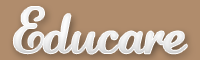
<style>
.page{position:relative;width:200px;height:60px;background:#b08c6c}
.page>*{position:absolute;margin:0}
.t1{font:46px "LaurenScript";color:#f8f8f8}
</style>
<div class="page">
<p class="t1" style="left:13px;top:7px;width:174px;height:47px">Educare</p>
</div>
